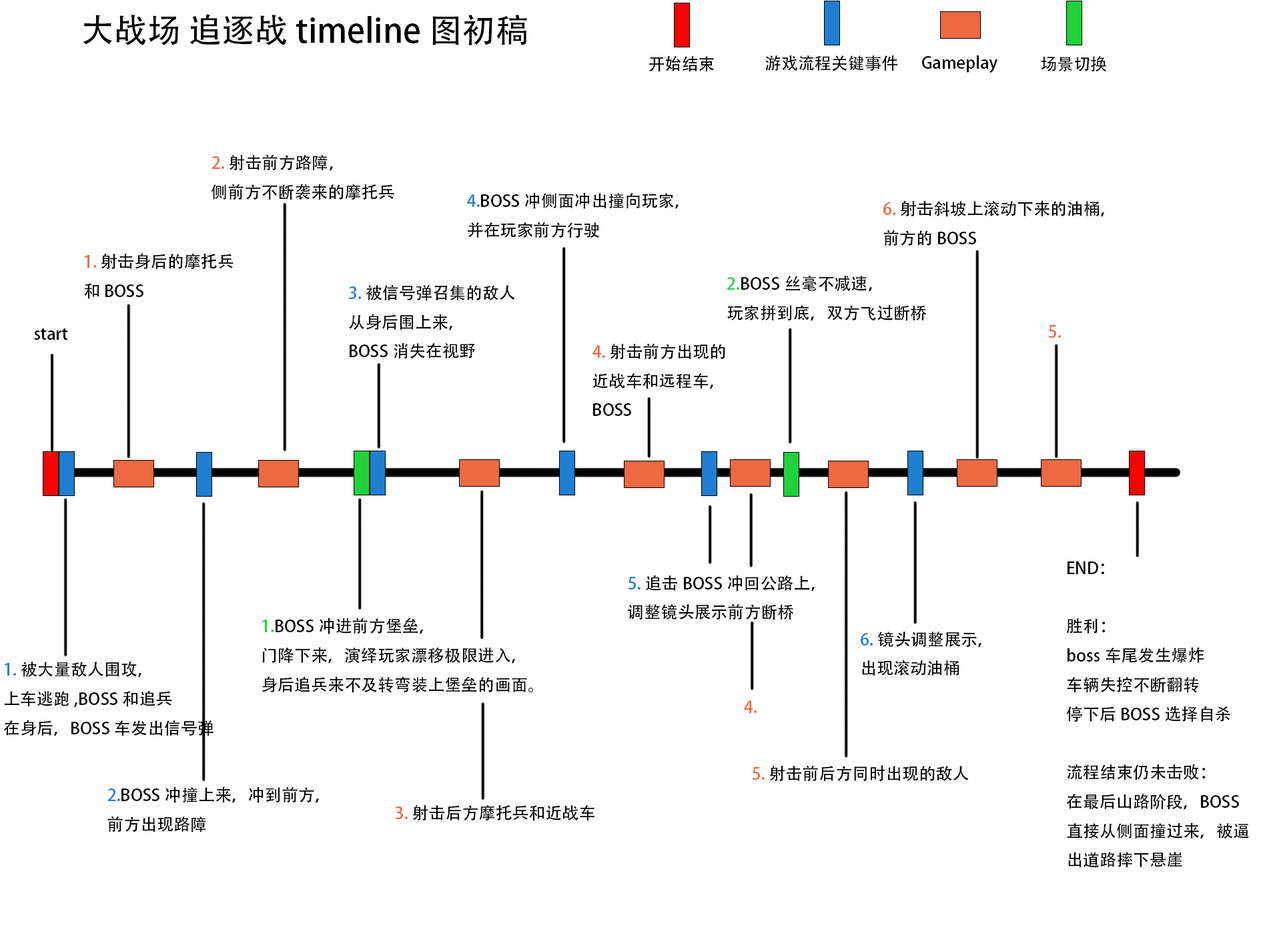
<style>
.page{position:relative;width:1261px;height:946px;background:#ffffff}
.page>*{position:absolute;margin:0}
.t1{font:33.4px "AdobeHeitiStd-Regular";color:#000000}
.t2{font:16.7px "AdobeHeitiStd-Regular";color:#000000}
.t3{font:16.7px "AdobeHeitiStd-Regular";color:#ec6941}
.t4{font:16.7px "AdobeHeitiStd-Regular";color:#207ed1}
.t5{font:16.7px "AdobeHeitiStd-Regular";color:#20d139}
</style>
<div class="page">
<p class="t1" style="left:83px;top:14px;width:444px;height:31px">大战场 追逐战 timeline图初稿</p>
<p class="t2" style="left:649px;top:55px;width:65px;height:16px">开始结束</p>
<p class="t2" style="left:765px;top:55px;width:132px;height:16px">游戏流程关键事件</p>
<p class="t2" style="left:922px;top:55px;width:76px;height:18px">Gameplay</p>
<p class="t2" style="left:1041px;top:55px;width:65px;height:17px">场景切换</p>
<p class="t2" style="left:211px;top:154px;width:183px;height:46px"><span class="t3">2.</span>射击前方路障，<br>侧前方不断袭来的摩托兵</p>
<p class="t2" style="left:467px;top:192px;width:212px;height:46px"><span class="t4">4.</span>BOSS冲侧面冲出撞向玩家，<br>并在玩家前方行驶</p>
<p class="t2" style="left:883px;top:200px;width:221px;height:46px"><span class="t3">6.</span>射击斜坡上滚动下来的油桶，<br>前方的BOSS</p>
<p class="t2" style="left:84px;top:253px;width:150px;height:46px"><span class="t3">1.</span>射击身后的摩托兵<br>和BOSS</p>
<p class="t2" style="left:727px;top:276px;width:199px;height:45px"><span class="t5">2.</span>BOSS丝毫不减速，<br>玩家拼到底，双方飞过断桥</p>
<p class="t2" style="left:348px;top:285px;width:167px;height:73px"><span class="t4">3.</span>被信号弹召集的敌人<br>从身后围上来，<br>BOSS消失在视野</p>
<p class="t2" style="left:34px;top:328px;width:34px;height:12px">start</p>
<p class="t3" style="left:1048px;top:325px;width:13px;height:13px">5.</p>
<p class="t2" style="left:593px;top:343px;width:132px;height:73px"><span class="t3">4.</span>射击前方出现的<br>近战车和远程车，<br>BOSS</p>
<p class="t2" style="left:1066px;top:561px;width:183px;height:306px">END：<br><br>胜利：<br>boss车尾发生爆炸<br>车辆失控不断翻转<br>停下后BOSS选择自杀<br><br>流程结束仍未击败：<br>在最后山路阶段，BOSS<br>直接从侧面撞过来，被逼<br>出道路摔下悬崖</p>
<p class="t2" style="left:628px;top:575px;width:187px;height:45px"><span class="t4">5.</span>追击BOSS冲回公路上，<br>调整镜头展示前方断桥</p>
<p class="t2" style="left:262px;top:617px;width:271px;height:76px"><span class="t5">1.</span>BOSS冲进前方堡垒，<br>门降下来，演绎玩家漂移极限进入，<br>身后追兵来不及转弯装上堡垒的画面。</p>
<p class="t2" style="left:861px;top:631px;width:121px;height:44px"><span class="t4">6.</span>镜头调整展示，<br>出现滚动油桶</p>
<p class="t2" style="left:3px;top:661px;width:211px;height:75px"><span class="t4">1.</span>被大量敌人围攻，<br>上车逃跑,BOSS和追兵<br>在身后，BOSS车发出信号弹</p>
<p class="t3" style="left:744px;top:700px;width:13px;height:13px">4.</p>
<p class="t2" style="left:752px;top:765px;width:217px;height:16px"><span class="t3">5.</span>射击前后方同时出现的敌人</p>
<p class="t2" style="left:107px;top:786px;width:212px;height:45px"><span class="t4">2.</span>BOSS冲撞上来，冲到前方，<br>前方出现路障</p>
<p class="t2" style="left:395px;top:805px;width:200px;height:16px"><span class="t3">3.</span>射击后方摩托兵和近战车</p>
</div>
